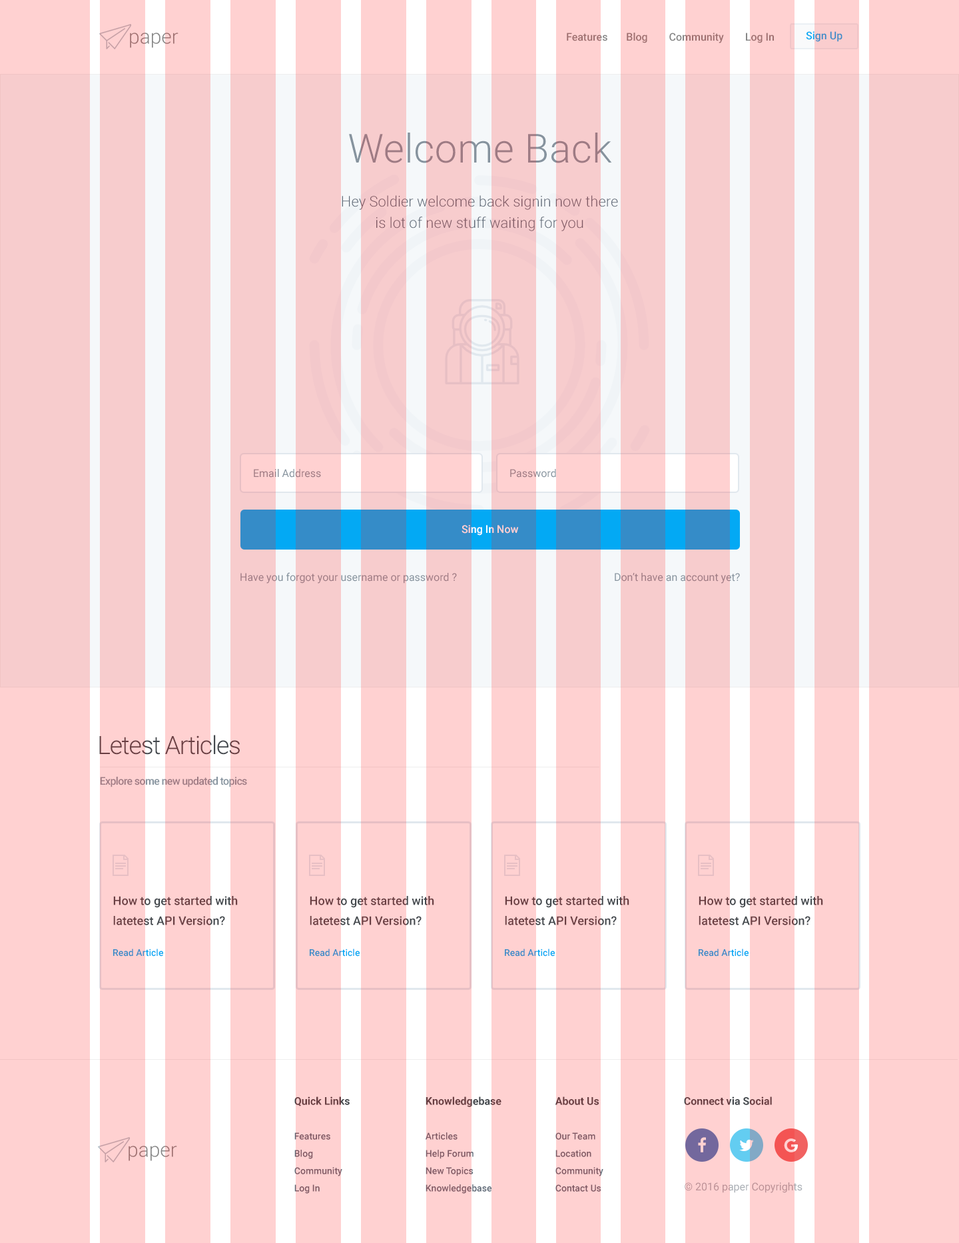
<style>
.page{position:relative;width:959px;height:1243px;background:#ffd1d1}
.page>*{position:absolute;margin:0}
.t1{font:20px "Roboto-Light";color:#868686}
.t2{font:10.7px "Roboto-Medium";color:#868686}
.t3{font:10.7px "Roboto-Medium";color:#358cc8}
.t4{font:40px "Roboto-Light";letter-spacing:0.01em}
.t5{font:14.7px/21.3px "Roboto-Light";color:#7e5964}
.t6{font:10.7px "Roboto-Regular";color:#9e7b84}
.t7{font:10.7px "Roboto-Regular"}
.t8{font:10.7px "Roboto-Medium"}
.t9{font:25.3px "Roboto-Light";letter-spacing:-0.04em;color:#693f43}
.t10{font:10.7px "Roboto-Medium";letter-spacing:-0.04em;color:#9e7b84}
.t11{font:12px/20px "Roboto-Medium"}
.t12{font:9.3px "Roboto-Medium"}
.t13{font:9.3px/17.3px "Roboto-Medium"}
.t14{font:10.7px/17.3px "Roboto-Bold"}
.t15{font:10.7px "Roboto-Bold";color:#693f43}
.t16{font:10.7px "Roboto-Regular";color:#bb9196}
</style>
<div class="page">
<p class="t1" style="left:130px;top:33px;width:49px;height:15px">paper</p>
<p class="t2" style="left:567px;top:33px;width:207px;height:10px">Features       Blog        Community        Log In</p>
<p class="t3" style="left:806px;top:31px;width:37px;height:11px">Sign Up</p>
<p class="t4" style="left:349px;top:133px;width:263px;height:30px">Welcome Back</p>
<p class="t5" style="left:342px;top:195px;width:276px;height:36px;text-align:center">Hey Soldier welcome back signin now there is lot of new stuff waiting for you</p>
<p class="t6" style="left:254px;top:469px;width:67px;height:9px">Email Address</p>
<p class="t7" style="left:510px;top:469px;width:46px;height:9px">Password</p>
<p class="t8" style="left:462px;top:525px;width:57px;height:11px">Sing In Now</p>
<p class="t6" style="left:240px;top:572px;width:217px;height:12px">Have you forgot your username or password ?</p>
<p class="t6" style="left:615px;top:573px;width:125px;height:11px">Don’t have an account yet?</p>
<p class="t9" style="left:99px;top:735px;width:141px;height:20px">Letest Articles</p>
<p class="t10" style="left:100px;top:777px;width:147px;height:10px">Explore some new updated topics</p>
<p class="t11" style="left:113px;top:896px;width:125px;height:29px">How to get started with latetest API Version?</p>
<p class="t11" style="left:310px;top:896px;width:124px;height:29px">How to get started with latetest API Version?</p>
<p class="t11" style="left:505px;top:896px;width:125px;height:29px">How to get started with latetest API Version?</p>
<p class="t11" style="left:699px;top:896px;width:124px;height:29px">How to get started with latetest API Version?</p>
<p class="t12" style="left:113px;top:949px;width:50px;height:8px">Read Article</p>
<p class="t12" style="left:310px;top:949px;width:50px;height:8px">Read Article</p>
<p class="t12" style="left:505px;top:949px;width:50px;height:8px">Read Article</p>
<p class="t12" style="left:699px;top:949px;width:50px;height:8px">Read Article</p>
<p class="t13" style="left:294px;top:1097px;width:56px;height:97px"><span class="t14">Quick Links<br><br></span>Features        <br>Blog<br>Community           <br>Log In</p>
<p class="t13" style="left:425px;top:1097px;width:77px;height:97px"><span class="t14">Knowledgebase<br><br></span>Articles        <br>Help Forum<br>New Topics <br>Knowledgebase</p>
<p class="t13" style="left:555px;top:1097px;width:49px;height:95px"><span class="t14">About Us<br><br></span>Our Team      <br>Location<br>Community           <br>Contact Us</p>
<p class="t15" style="left:684px;top:1097px;width:88px;height:8px">Connect via Social</p>
<p class="t1" style="left:129px;top:1146px;width:48px;height:15px">paper</p>
<p class="t16" style="left:685px;top:1182px;width:118px;height:11px">© 2016 paper Copyrights</p>
</div>
